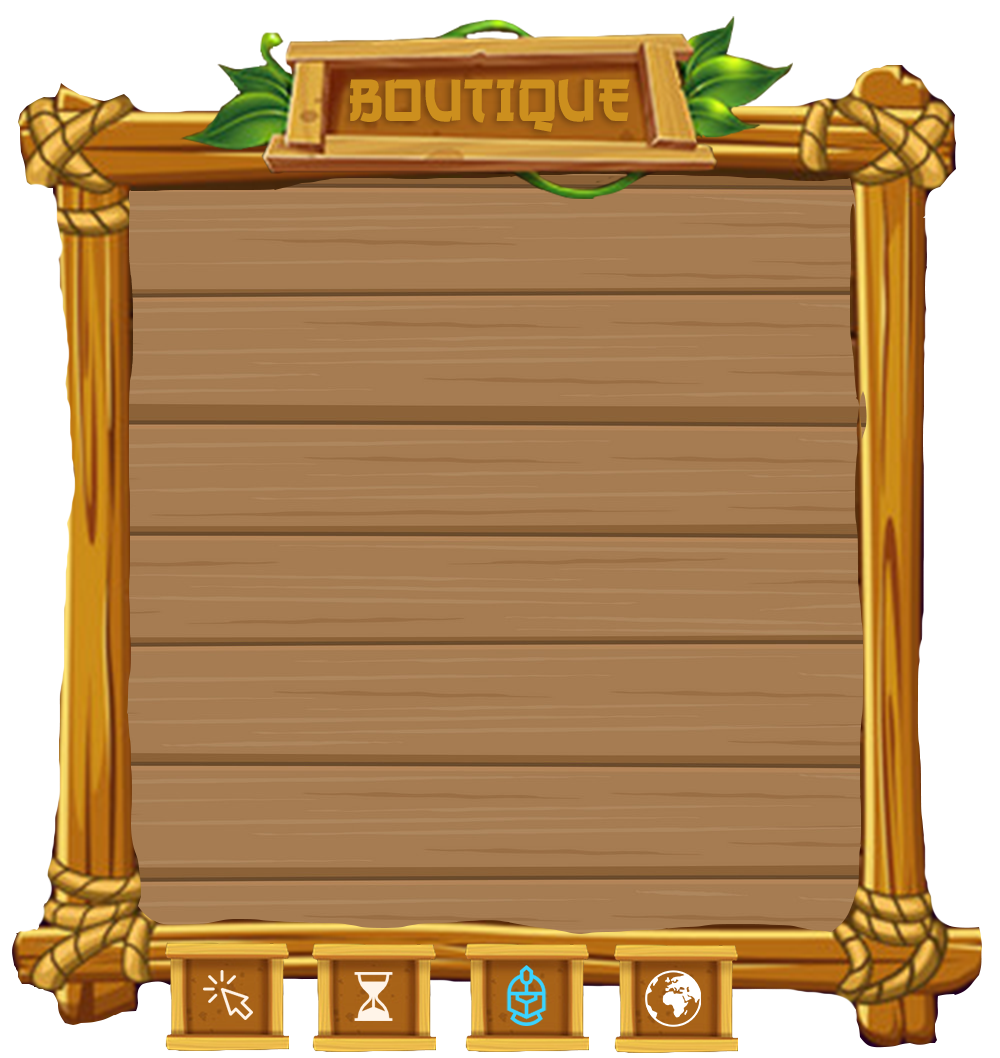
<style>
.page{position:relative;width:1000px;height:1058px;background:#a67c52}
.page>*{position:absolute;margin:0}
.t1{font:62.5px "GangofThree";letter-spacing:0.02em;color:#cc8f1e}
</style>
<div class="page">
<p class="t1" style="left:350px;top:79px;width:280px;height:53px">BOUTIQUE</p>
</div>
